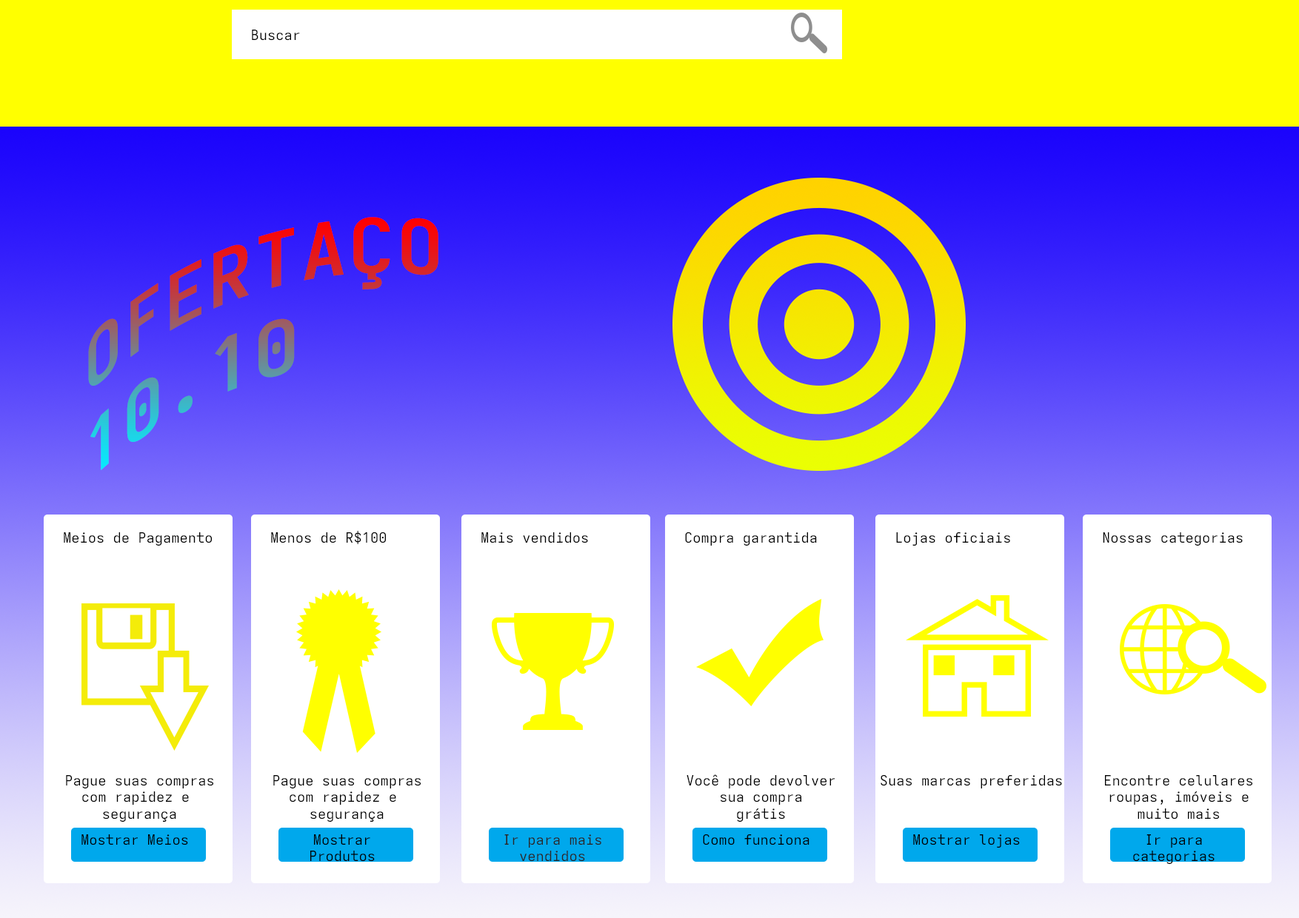
<style>
.page{position:relative;width:1299px;height:918px;background:#ffffff}
.page>*{position:absolute;margin:0}
.t1{font:13.9px "Adwaita-Mono";color:#000000}
.t2{font:74px "Adwaita-Mono-Bold"}
.t3{font:13.9px "Adwaita-Mono";color:#282828}
</style>
<div class="page">
<p class="t1" style="left:252px;top:30px;width:48px;height:11px">Buscar</p>
<p class="t2" style="left:88px;top:217px;width:350px;height:253px">OFERTAÇO<br>10.10</p>
<p class="t1" style="left:64px;top:532px;width:148px;height:14px">Meios de Pagamento</p>
<p class="t1" style="left:271px;top:531px;width:115px;height:13px">Menos de R$100</p>
<p class="t1" style="left:481px;top:532px;width:107px;height:11px">Mais vendidos</p>
<p class="t1" style="left:685px;top:532px;width:132px;height:14px">Compra garantida</p>
<p class="t1" style="left:896px;top:532px;width:114px;height:14px">Lojas oficiais</p>
<p class="t1" style="left:1103px;top:532px;width:139px;height:14px">Nossas categorias</p>
<p class="t1" style="left:66px;top:775px;width:147px;height:47px;text-align:center">Pague suas compras<br>com rapidez e <br>segurança</p>
<p class="t1" style="left:273px;top:775px;width:148px;height:47px;text-align:center">Pague suas compras<br>com rapidez e <br>segurança</p>
<p class="t1" style="left:686px;top:775px;width:148px;height:47px;text-align:center">Você pode devolver<br>sua compra<br>grátis</p>
<p class="t1" style="left:880px;top:775px;width:182px;height:14px">Suas marcas preferidas</p>
<p class="t1" style="left:1105px;top:775px;width:147px;height:45px;text-align:center">Encontre celulares<br>roupas, imóveis e<br>muito mais</p>
<p class="t1" style="left:703px;top:834px;width:106px;height:12px">Como funciona</p>
<p class="t1" style="left:81px;top:834px;width:107px;height:12px">Mostrar Meios</p>
<p class="t1" style="left:310px;top:834px;width:65px;height:28px;text-align:center">Mostrar Produtos</p>
<p class="t3" style="left:504px;top:834px;width:97px;height:28px;text-align:center">Ir para mais vendidos</p>
<p class="t1" style="left:913px;top:834px;width:107px;height:14px">Mostrar lojas</p>
<p class="t1" style="left:1133px;top:834px;width:81px;height:30px;text-align:center">Ir para categorias</p>
</div>
